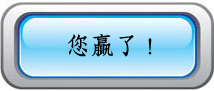
<style>
.page{position:relative;width:214px;height:91px}
.page>*{position:absolute;margin:0}
.t1{font:24px "DFFangSongStd-W6";color:#000000}
</style>
<div class="page">
<p class="t1" style="left:68px;top:34px;width:84px;height:23px">您贏了！</p>
</div>
